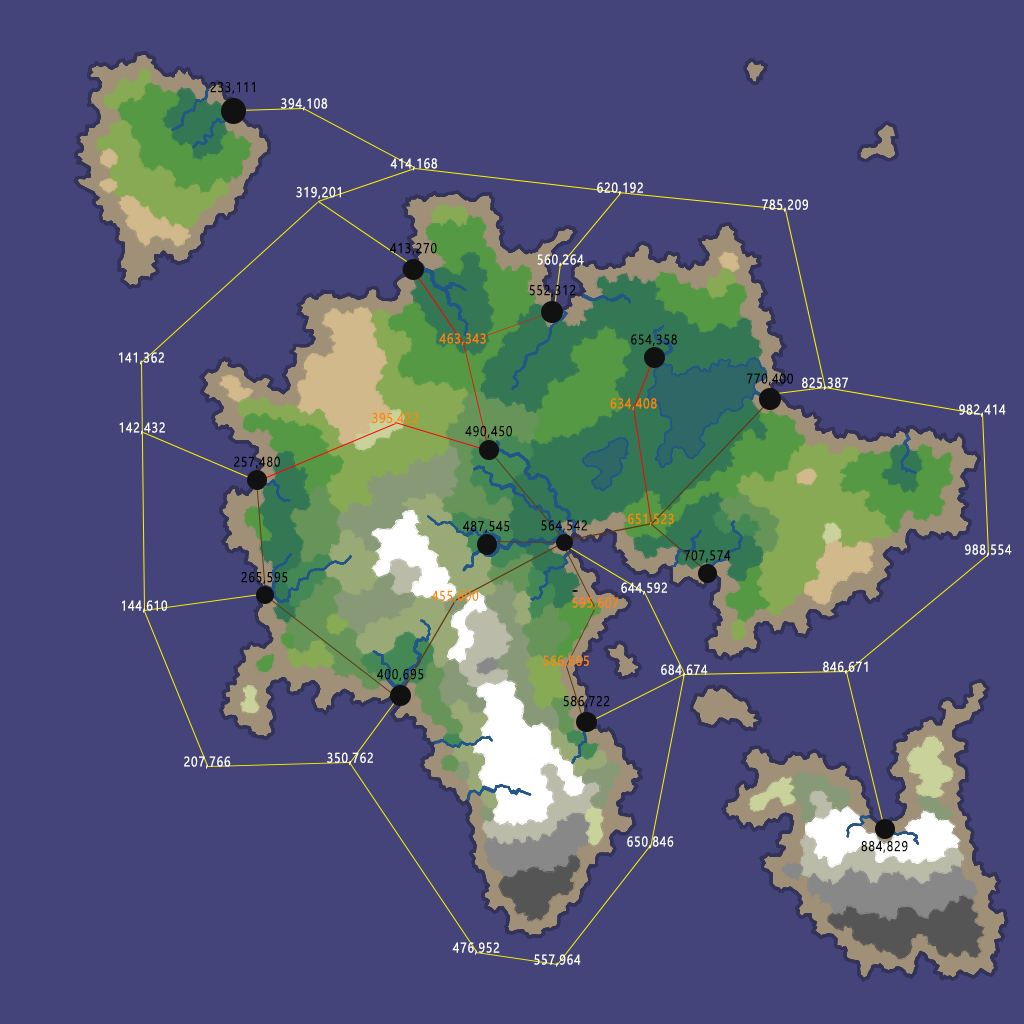
<style>
.page{position:relative;width:1024px;height:1024px;background:#44447a}
.page>*{position:absolute;margin:0}
.t1{font:14.3px "SegoeUI";letter-spacing:0.075em;color:#000000;scale:0.84 1}
.t2{font:14px "SegoeUI";letter-spacing:0.075em;color:#ffffff;scale:0.85 1}
.t3{font:14.3px "SegoeUI";letter-spacing:0.075em;color:#ffffff;scale:0.84 1}
.t4{font:14px "SegoeUI";letter-spacing:0.075em;color:#ff8400;scale:0.85 1}
.t5{font:14px "SegoeUI";letter-spacing:0.075em;color:#000000;scale:0.85 1}
</style>
<div class="page">
<p class="t1" style="left:210px;top:81px;width:45px;height:13px">233,111</p>
<p class="t2" style="left:281px;top:98px;width:47px;height:13px">394,108</p>
<p class="t2" style="left:390px;top:158px;width:48px;height:13px">414,168</p>
<p class="t2" style="left:597px;top:182px;width:46px;height:13px">620,192</p>
<p class="t3" style="left:296px;top:186px;width:45px;height:13px">319,201</p>
<p class="t2" style="left:762px;top:199px;width:46px;height:13px">785,209</p>
<p class="t1" style="left:390px;top:242px;width:47px;height:13px">413,270</p>
<p class="t2" style="left:537px;top:254px;width:47px;height:13px">560,264</p>
<p class="t1" style="left:529px;top:284px;width:47px;height:13px">552,312</p>
<p class="t4" style="left:439px;top:333px;width:47px;height:13px">463,343</p>
<p class="t5" style="left:631px;top:334px;width:46px;height:13px">654,358</p>
<p class="t2" style="left:119px;top:352px;width:45px;height:13px">141,362</p>
<p class="t5" style="left:747px;top:373px;width:46px;height:13px">770,400</p>
<p class="t2" style="left:802px;top:377px;width:46px;height:13px">825,387</p>
<p class="t4" style="left:610px;top:398px;width:47px;height:13px">634,408</p>
<p class="t4" style="left:372px;top:412px;width:46px;height:13px">395,422</p>
<p class="t2" style="left:959px;top:404px;width:47px;height:13px">982,414</p>
<p class="t2" style="left:119px;top:422px;width:46px;height:13px">142,432</p>
<p class="t1" style="left:465px;top:425px;width:47px;height:13px">490,450</p>
<p class="t5" style="left:234px;top:456px;width:46px;height:13px">257,480</p>
<p class="t1" style="left:463px;top:520px;width:47px;height:13px">487,545</p>
<p class="t5" style="left:541px;top:520px;width:46px;height:13px">564,542</p>
<p class="t4" style="left:628px;top:513px;width:46px;height:13px">651,523</p>
<p class="t2" style="left:965px;top:544px;width:47px;height:13px">988,554</p>
<p class="t5" style="left:684px;top:550px;width:47px;height:13px">707,574</p>
<p class="t1" style="left:241px;top:571px;width:47px;height:13px">265,595</p>
<p class="t2" style="left:621px;top:582px;width:46px;height:13px">644,592</p>
<p class="t4" style="left:431px;top:590px;width:48px;height:13px">455,600</p>
<p class="t2" style="left:122px;top:600px;width:46px;height:13px">144,610</p>
<p class="t4" style="left:572px;top:597px;width:47px;height:13px">595,607</p>
<p class="t4" style="left:543px;top:655px;width:46px;height:13px">566,665</p>
<p class="t2" style="left:661px;top:664px;width:47px;height:13px">684,674</p>
<p class="t2" style="left:823px;top:661px;width:45px;height:13px">846,671</p>
<p class="t1" style="left:377px;top:668px;width:47px;height:13px">400,695</p>
<p class="t1" style="left:563px;top:695px;width:47px;height:13px">586,722</p>
<p class="t2" style="left:184px;top:756px;width:47px;height:13px">207,766</p>
<p class="t2" style="left:327px;top:752px;width:46px;height:13px">350,762</p>
<p class="t2" style="left:627px;top:836px;width:47px;height:13px">650,846</p>
<p class="t1" style="left:861px;top:840px;width:47px;height:13px">884,829</p>
<p class="t2" style="left:452px;top:942px;width:48px;height:13px">476,952</p>
<p class="t2" style="left:534px;top:954px;width:47px;height:13px">557,964</p>
</div>
